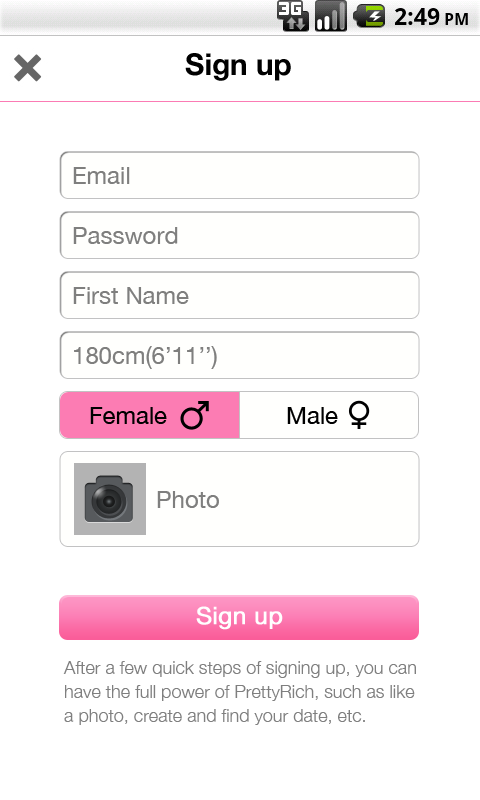
<style>
.page{position:relative;width:480px;height:800px;background:#ffffff}
.page>*{position:absolute;margin:0}
.t1{font:30px "HelveticaNeue-Bold";color:#000000}
.t2{font:24px "HelveticaNeue";color:#7f7f7e}
.t3{font:24px "HelveticaNeue";color:#000000}
.t4{font:24px "HelveticaNeue";color:#ffffff;font-weight:bold}
.t5{font:18px/6px "HelveticaNeue-Light";color:#7f7f7f}
</style>
<div class="page">
<p class="t1" style="left:185px;top:53px;width:106px;height:28px">Sign up</p>
<p class="t2" style="left:73px;top:167px;width:57px;height:17px">Email</p>
<p class="t2" style="left:73px;top:227px;width:105px;height:17px">Password</p>
<p class="t2" style="left:73px;top:287px;width:116px;height:17px">First Name</p>
<p class="t2" style="left:74px;top:346px;width:143px;height:23px">180cm(6’11’’)</p>
<p class="t3" style="left:90px;top:407px;width:77px;height:17px">Female</p>
<p class="t3" style="left:287px;top:407px;width:51px;height:17px">Male</p>
<p class="t2" style="left:157px;top:491px;width:62px;height:17px">Photo</p>
<p class="t4" style="left:196px;top:606px;width:87px;height:24px">Sign up</p>
<p class="t5" style="left:63px;top:661px;width:353px;height:64px">After a few quick steps of signing up, you can<br><br><br><br>have the full power of PrettyRich, such as like <br><br><br><br>a photo, create and find your date, etc.</p>
</div>
